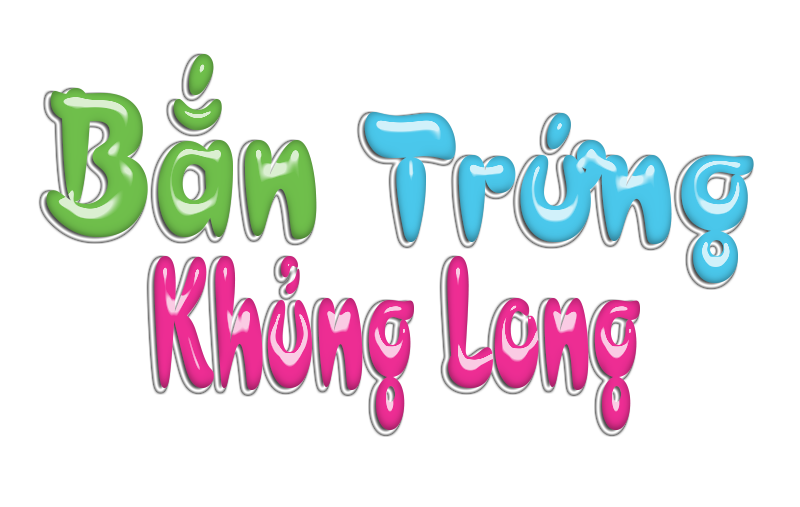
<style>
.page{position:relative;width:800px;height:507px;background:#ffffff}
.page>*{position:absolute;margin:0}
.t1{font:211px "UVNBanhMi";color:#6ebd4a;scale:0.83 1}
.t2{font:188.1px "UVNBanhMi";scale:0.91 1}
.t3{font:191.4px "UVNBanhMi";color:#ea2c92;scale:0.56 1}
</style>
<div class="page">
<p class="t1" style="left:46px;top:54px;width:271px;height:185px">Bắn</p>
<p class="t2" style="left:364px;top:112px;width:390px;height:171px">Trứng</p>
<p class="t3" style="left:154px;top:256px;width:486px;height:174px">Khủng Long</p>
</div>
